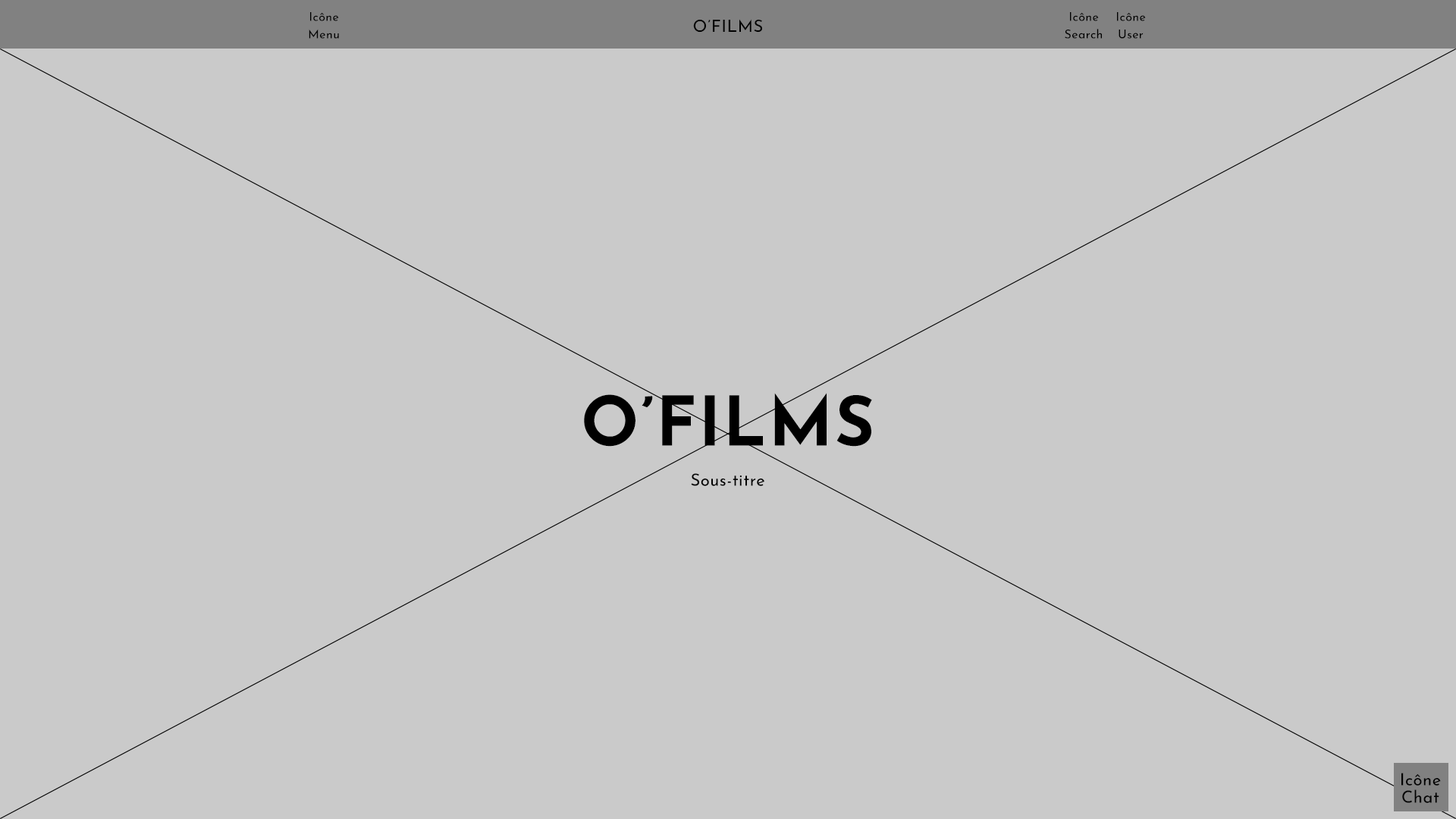
<style>
.page{position:relative;width:1456px;height:819px;background:#cacaca}
.page>*{position:absolute;margin:0}
.t1{font:12.1px/8.7px "JosefinSans-Regular";letter-spacing:0.025em;color:#000000}
.t2{font:16.7px "JosefinSans-Regular";letter-spacing:0.025em;color:#000000}
.t3{font:68.3px "JosefinSans-Bold";letter-spacing:0.025em;color:#000000}
.t4{font:16.7px/8.7px "JosefinSans-Regular";letter-spacing:0.025em;color:#000000}
</style>
<div class="page">
<p class="t1" style="left:309px;top:12px;width:30px;height:27px;text-align:center">Icône<br><br>Menu</p>
<p class="t1" style="left:1065px;top:12px;width:37px;height:27px;text-align:center">Icône<br><br>Search</p>
<p class="t1" style="left:1117px;top:12px;width:29px;height:27px;text-align:center">Icône<br><br>User</p>
<p class="t2" style="left:693px;top:19px;width:69px;height:14px">O’FILMS</p>
<p class="t3" style="left:584px;top:393px;width:288px;height:54px">O’FILMS</p>
<p class="t2" style="left:691px;top:473px;width:73px;height:13px">Sous-titre</p>
<p class="t4" style="left:1401px;top:773px;width:40px;height:30px;text-align:center">Icône<br><br>Chat</p>
</div>
